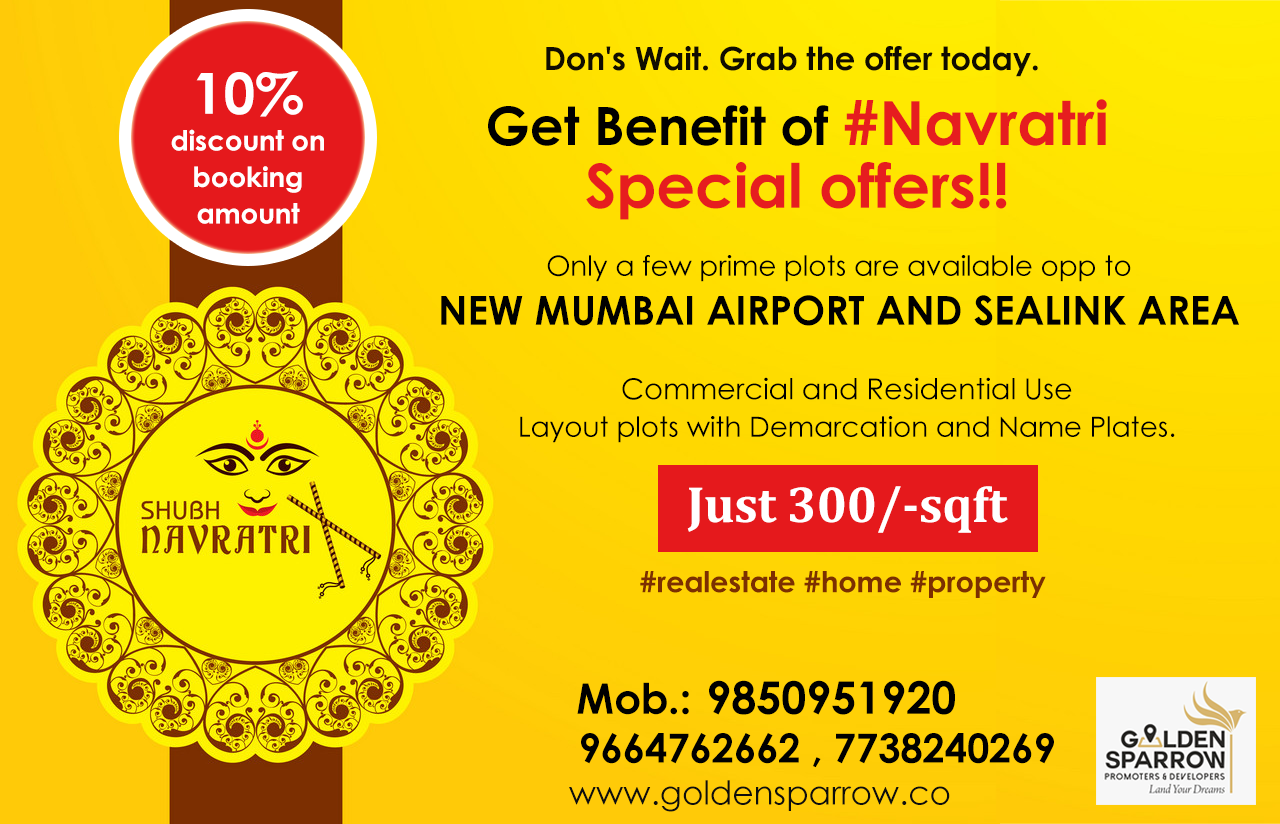
<style>
.page{position:relative;width:1280px;height:824px}
.page>*{position:absolute;margin:0}
.t1{font:32px "CenturyGothic-Bold";letter-spacing:-0.005em;color:#100d00}
.t2{font:27.7px/36.6px "CenturyGothic-Bold";letter-spacing:-0.005em;color:#ffffff}
.t3{font:56.7px/36.6px "CenturyGothic-Bold";letter-spacing:-0.005em;color:#ffffff}
.t4{font:61px/63px "CenturyGothic-Bold";letter-spacing:-0.005em;color:#e61d1f}
.t5{font:53px/63px "CenturyGothic-Bold";letter-spacing:-0.005em;color:#000000}
.t6{font:28px/37px "CenturyGothic";letter-spacing:-0.005em;color:#000000}
.t7{font:40px/49px "CenturyGothic-Bold";letter-spacing:-0.005em;color:#000000;text-transform:uppercase}
.t8{font:29px "CenturyGothic";letter-spacing:-0.005em;color:#000000}
.t9{font:28.1px/85.3px "CenturyGothic";letter-spacing:-0.005em;color:#000000}
.t10{font:51.2px/85.3px "Cambria-Bold";letter-spacing:-0.005em;color:#ffffff}
.t11{font:29px "CenturyGothic-Bold";letter-spacing:-0.005em;color:#7c2f01}
.t12{font:45px "CenturyGothic-Bold";letter-spacing:-0.005em;color:#000000}
.t13{font:42px "CenturyGothic-Bold";letter-spacing:-0.005em;color:#000000}
.t14{font:40px "CenturyGothic-Bold";letter-spacing:-0.005em;color:#000000}
.t15{font:33px "CenturyGothic";letter-spacing:-0.005em;color:#0e0e0e}
</style>
<div class="page">
<p class="t1" style="left:546px;top:46px;width:492px;height:31px">Don's Wait. Grab the offer today.</p>
<p class="t2" style="left:171px;top:71px;width:153px;height:153px;text-align:center"><span class="t3">10%      </span>discount on   booking   amount</p>
<p class="t4" style="left:488px;top:99px;width:619px;height:121px;text-align:center"><span class="t5">Get Benefit of </span>#Navratri         Special offers!!</p>
<p class="t6" style="left:441px;top:255px;width:798px;height:71px;text-align:center">Only a few prime plots are available opp to                         <span class="t7">New Mumbai Airport and Sealink Area</span></p>
<p class="t8" style="left:622px;top:377px;width:450px;height:23px">Commercial and Residential Use</p>
<p class="t9" style="left:520px;top:416px;width:655px;height:117px;text-align:center">Layout plots with Demarcation and Name Plates.<br><span class="t10">Just 300/-sqft</span></p>
<p class="t11" style="left:640px;top:571px;width:406px;height:27px">#realestate #home #property</p>
<p class="t12" style="left:577px;top:680px;width:378px;height:35px"><span class="t13">Mob.: </span>9850951920</p>
<p class="t14" style="left:581px;top:733px;width:473px;height:35px">9664762662 , 7738240269</p>
<p class="t15" style="left:569px;top:780px;width:381px;height:32px">www.goldensparrow.co</p>
</div>
